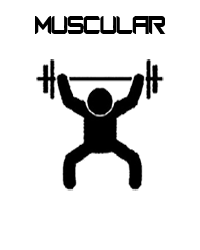
<style>
.page{position:relative;width:200px;height:250px;background:#ffffff}
.page>*{position:absolute;margin:0}
.t1{font:21.8px "Amazing-Spider-Man";color:#000000;scale:0.93 1}
</style>
<div class="page">
<p class="t1" style="left:35px;top:16px;width:131px;height:18px">muscular</p>
</div>
